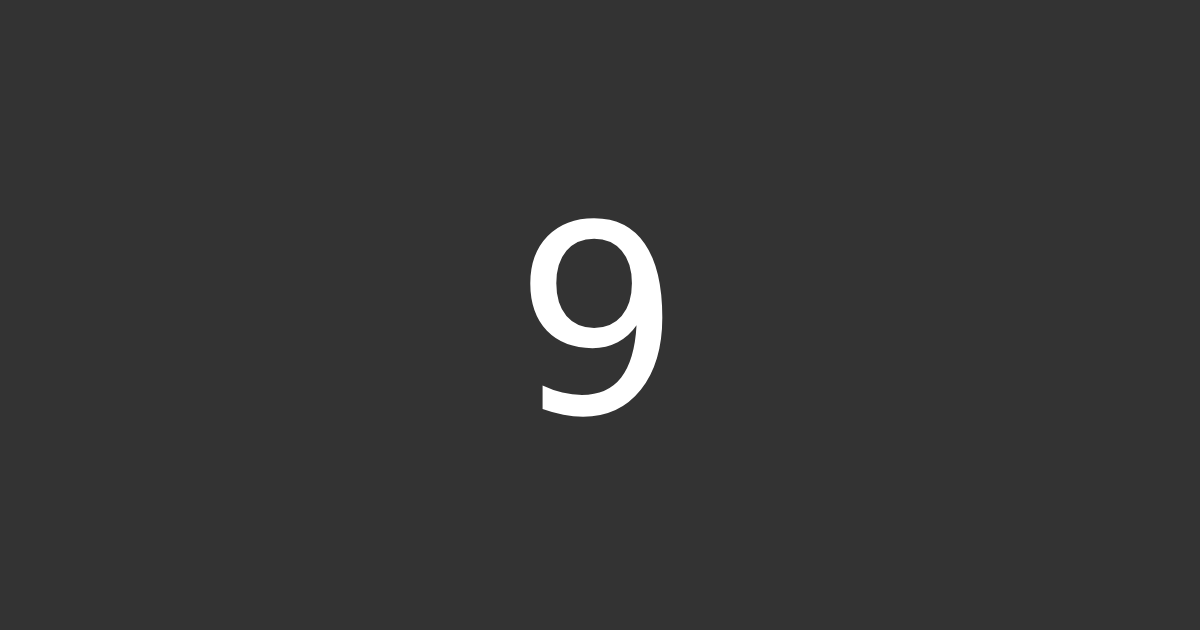
<style>
.page{position:relative;width:1200px;height:630px;background:#333333}
.page>*{position:absolute;margin:0}
.t1{font:262.5px "DejaVuSans";color:#ffffff}
</style>
<div class="page">
<p class="t1" style="left:530px;top:218px;width:133px;height:199px">9</p>
</div>
